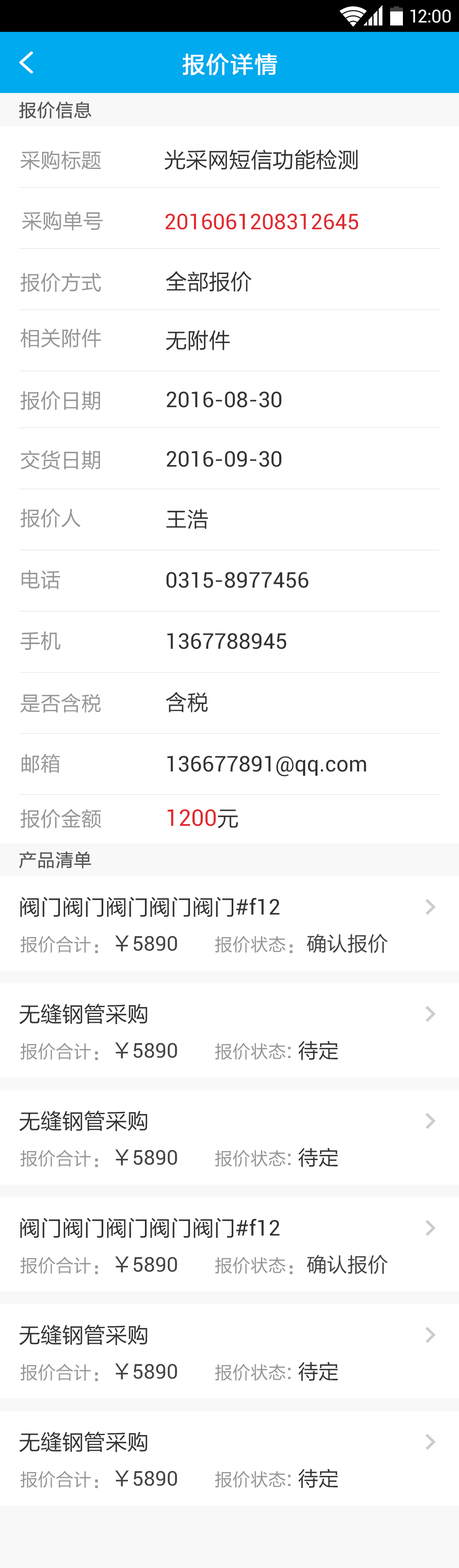
<style>
.page{position:relative;width:459px;height:1568px;background:#ffffff}
.page>*{position:absolute;margin:0}
.t1{font:17.8px "Roboto-Regular";color:#ffffff}
.t2{font:22.9px "FZLTHJW--GB1-0";letter-spacing:0.02em;color:#ffffff;font-weight:bold}
.t3{font:17.8px "FZLTHJW--GB1-0";color:#555555;font-weight:bold}
.t4{font:21.7px "FZLTHK--GBK1-0";color:#333333}
.t5{font:20.4px "FZLTHJW--GB1-0";color:#969696}
.t6{font:21.7px "Roboto-Regular";color:#e1292e}
.t7{font:21.7px "FZLTHJW--GB1-0";color:#333333}
.t8{font:21.7px "Roboto-Regular";color:#333333}
.t9{font:22.9px "Roboto-Regular";color:#e1292e}
.t10{font:17.8px "FZLTHJW--GB1-0";color:#969696}
.t11{font:20.4px "FZLTHJW--GB1-0";color:#444444}
.t12{font:20.4px "Roboto-Regular";color:#444444}
.t13{font:20.4px "FZLTHJW--GB1-0";color:#333333}
</style>
<div class="page">
<p class="t1" style="left:410px;top:9px;width:40px;height:14px">12:00</p>
<p class="t2" style="left:182px;top:53px;width:95px;height:22px">报价详情</p>
<p class="t3" style="left:19px;top:101px;width:72px;height:18px">报价信息</p>
<p class="t4" style="left:164px;top:149px;width:194px;height:21px">光采网短信功能检测</p>
<p class="t5" style="left:20px;top:150px;width:81px;height:20px">采购标题</p>
<p class="t5" style="left:22px;top:211px;width:81px;height:20px">采购单号</p>
<p class="t6" style="left:165px;top:214px;width:193px;height:16px">2016061208312645</p>
<p class="t5" style="left:20px;top:273px;width:81px;height:19px">报价方式</p>
<p class="t7" style="left:166px;top:271px;width:85px;height:21px">全部报价</p>
<p class="t5" style="left:20px;top:328px;width:81px;height:20px">相关附件</p>
<p class="t7" style="left:166px;top:330px;width:64px;height:20px">无附件</p>
<p class="t5" style="left:20px;top:391px;width:80px;height:19px">报价日期</p>
<p class="t8" style="left:166px;top:391px;width:115px;height:17px">2016-08-30</p>
<p class="t5" style="left:21px;top:450px;width:79px;height:20px">交货日期</p>
<p class="t8" style="left:166px;top:451px;width:115px;height:16px">2016-09-30</p>
<p class="t5" style="left:20px;top:508px;width:61px;height:20px">报价人</p>
<p class="t7" style="left:166px;top:509px;width:42px;height:20px">王浩</p>
<p class="t5" style="left:22px;top:570px;width:38px;height:19px">电话</p>
<p class="t8" style="left:166px;top:572px;width:142px;height:16px">0315-8977456</p>
<p class="t5" style="left:20px;top:631px;width:41px;height:19px">手机</p>
<p class="t8" style="left:167px;top:633px;width:119px;height:16px">1367788945</p>
<p class="t5" style="left:20px;top:693px;width:81px;height:20px">是否含税</p>
<p class="t7" style="left:166px;top:692px;width:42px;height:20px">含税</p>
<p class="t5" style="left:22px;top:754px;width:38px;height:19px">邮箱</p>
<p class="t8" style="left:167px;top:756px;width:199px;height:21px">136677891@qq.com</p>
<p class="t5" style="left:20px;top:809px;width:81px;height:19px">报价金额</p>
<p class="t9" style="left:167px;top:809px;width:71px;height:19px">1200<span class="t7">元</span></p>
<p class="t3" style="left:19px;top:851px;width:72px;height:17px">产品清单</p>
<p class="t7" style="left:20px;top:897px;width:259px;height:20px">阀门阀门阀门阀门阀门<span class="t8">#f12</span></p>
<p class="t10" style="left:20px;top:935px;width:157px;height:18px">报价合计<span class="t5">：</span><span class="t11">￥</span><span class="t12">5890</span></p>
<p class="t10" style="left:215px;top:934px;width:172px;height:19px">报价状态<span class="t5">：</span><span class="t11">确认报价</span></p>
<p class="t7" style="left:19px;top:1004px;width:128px;height:20px">无缝钢管采购</p>
<p class="t10" style="left:20px;top:1042px;width:157px;height:18px">报价合计<span class="t5">：</span><span class="t11">￥</span><span class="t12">5890</span></p>
<p class="t10" style="left:215px;top:1041px;width:123px;height:19px">报价状态<span class="t5">: </span><span class="t13">待定</span></p>
<p class="t7" style="left:19px;top:1111px;width:128px;height:20px">无缝钢管采购</p>
<p class="t10" style="left:20px;top:1149px;width:157px;height:18px">报价合计<span class="t5">：</span><span class="t11">￥</span><span class="t12">5890</span></p>
<p class="t10" style="left:215px;top:1148px;width:123px;height:19px">报价状态<span class="t5">: </span><span class="t13">待定</span></p>
</div>
